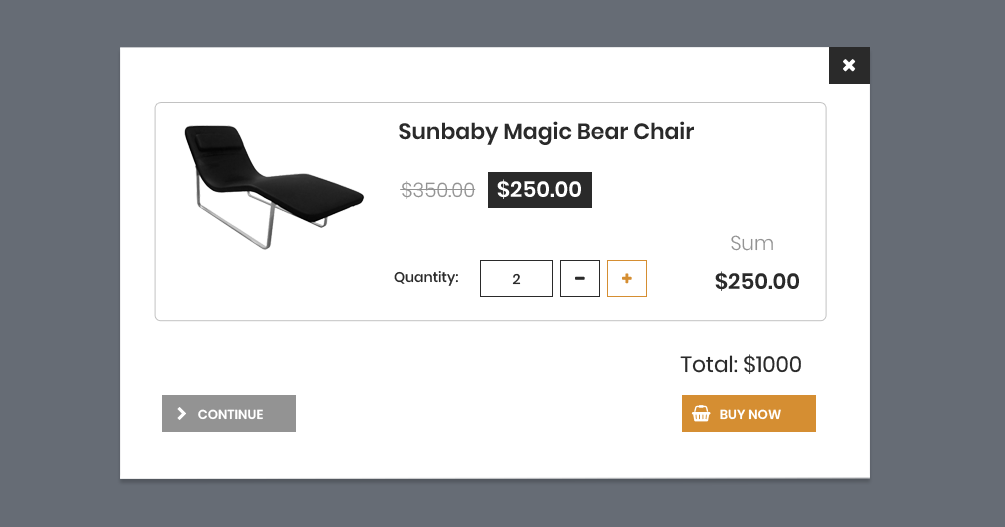
<style>
.page{position:relative;width:1005px;height:527px;background:#ffffff}
.page>*{position:absolute;margin:0}
.t1{font:22px "Poppins-SemiBold";color:#2a2a2a}
.t2{font:20px "Poppins-Light";color:#939393}
.t3{font:22px "Poppins-SemiBold";color:#ffffff}
.t4{font:14px "Poppins-Medium";color:#2a2a2a}
.t5{font:22px "Poppins-Regular";color:#2a2a2a}
.t6{font:13px "Poppins-SemiBold";color:#ffffff;text-transform:uppercase}
</style>
<div class="page">
<p class="t1" style="left:399px;top:121px;width:295px;height:24px">Sunbaby Magic Bear Chair</p>
<p class="t2" style="left:402px;top:181px;width:73px;height:18px">$350.00</p>
<p class="t3" style="left:497px;top:179px;width:84px;height:20px">$250.00</p>
<p class="t2" style="left:731px;top:235px;width:42px;height:16px">Sum</p>
<p class="t4" style="left:394px;top:271px;width:64px;height:15px">Quantity:</p>
<p class="t4" style="left:512px;top:273px;width:9px;height:12px">2</p>
<p class="t1" style="left:715px;top:271px;width:84px;height:20px">$250.00</p>
<p class="t5" style="left:680px;top:354px;width:121px;height:20px">Total: $1000</p>
<p class="t6" style="left:198px;top:409px;width:65px;height:11px">continue</p>
<p class="t6" style="left:720px;top:409px;width:61px;height:11px">buy now</p>
</div>
